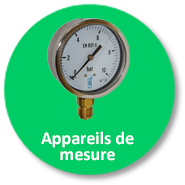
<style>
.page{position:relative;width:185px;height:185px;background:#00cc66}
.page>*{position:absolute;margin:0}
.t1{font:18px/16px "Calibri-Bold";color:#ffffff}
</style>
<div class="page">
<p class="t1" style="left:41px;top:131px;width:93px;height:30px;text-align:center">Appareils de <br>mesure</p>
</div>
